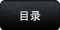
<style>
.page{position:relative;width:60px;height:30px}
.page>*{position:absolute;margin:0}
.t1{font:11.3px "AdobeHeitiStd-Regular";color:#ffffff}
</style>
<div class="page">
<p class="t1" style="left:20px;top:11px;width:21px;height:10px">目录</p>
</div>
